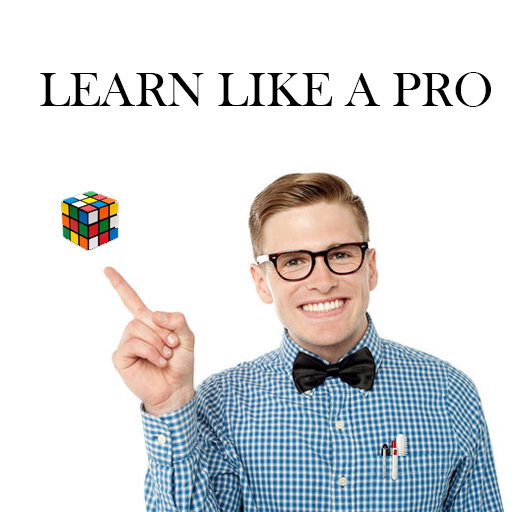
<style>
.page{position:relative;width:512px;height:512px;background:#ffffff}
.page>*{position:absolute;margin:0}
.t1{font:50px "BaskOldFace";color:#000000}
</style>
<div class="page">
<p class="t1" style="left:40px;top:72px;width:451px;height:35px">LEARN LIKE A PRO</p>
</div>
